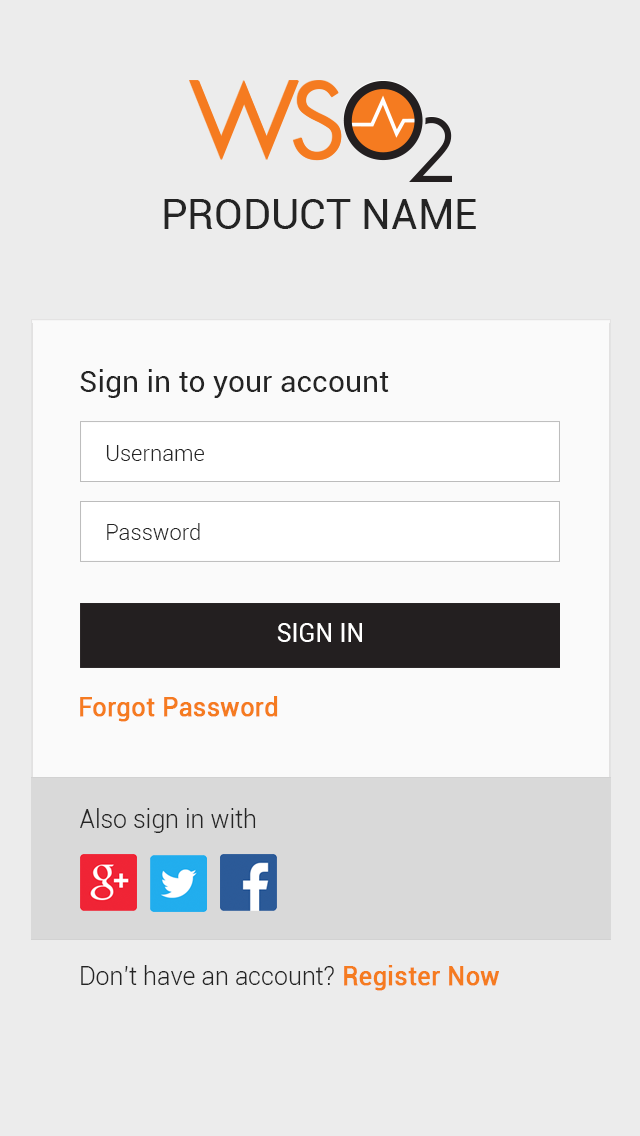
<style>
.page{position:relative;width:640px;height:1136px;background:#ececec}
.page>*{position:absolute;margin:0}
.t1{font:42.1px "Roboto-Regular";color:#242424;text-transform:uppercase}
.t2{font:30px "Roboto-Regular";color:#242424}
.t3{font:22px "Roboto-Light"}
.t4{font:22px "Roboto-Light";color:#242424}
.t5{font:25px "Roboto-Regular";color:#ffffff;text-transform:uppercase}
.t6{font:25px "Roboto-Regular";color:#f57b20;font-weight:bold}
.t7{font:23.9px "Roboto-Light";scale:1.04 1}
.t8{font:25px "Roboto-Light";color:#242424}
.t9{font:23.9px "Roboto-Light";color:#e4e4e4;scale:1.05 1}
.t10{font:23.9px "Roboto-Regular";color:#f57b20;font-weight:bold;scale:1.05 1}
</style>
<div class="page">
<p class="t1" style="left:164px;top:199px;width:312px;height:30px">Product Name</p>
<p class="t1" style="left:164px;top:199px;width:312px;height:30px">Product Name</p>
<p class="t2" style="left:80px;top:369px;width:309px;height:29px">Sign in to your account</p>
<p class="t2" style="left:80px;top:369px;width:309px;height:29px">Sign in to your account</p>
<p class="t3" style="left:106px;top:444px;width:98px;height:16px">Username</p>
<p class="t4" style="left:106px;top:445px;width:98px;height:16px">Username</p>
<p class="t4" style="left:107px;top:523px;width:93px;height:17px">Password</p>
<p class="t4" style="left:107px;top:523px;width:93px;height:17px">Password</p>
<p class="t5" style="left:277px;top:622px;width:85px;height:19px">Sign in</p>
<p class="t5" style="left:277px;top:623px;width:85px;height:19px">Sign in</p>
<p class="t6" style="left:80px;top:696px;width:198px;height:26px">Forgot Password</p>
<p class="t6" style="left:80px;top:696px;width:198px;height:26px">Forgot Password</p>
<p class="t7" style="left:80px;top:807px;width:176px;height:24px">Also sign in with</p>
<p class="t8" style="left:80px;top:808px;width:176px;height:25px">Also sign in with</p>
<p class="t9" style="left:81px;top:966px;width:418px;height:25px">Don’t have an account? <span class="t10">Register Now</span></p>
<p class="t8" style="left:81px;top:965px;width:418px;height:26px">Don’t have an account? <span class="t6">Register Now</span></p>
</div>
